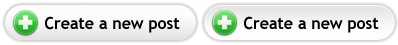
<style>
.page{position:relative;width:398px;height:45px}
.page>*{position:absolute;margin:0}
.t1{font:16.8px "TrebuchetMS-Bold";color:#000000;scale:0.95 1}
</style>
<div class="page">
<p class="t1" style="left:45px;top:16px;width:135px;height:17px">Create a new post</p>
<p class="t1" style="left:244px;top:16px;width:135px;height:17px">Create a new post</p>
</div>
